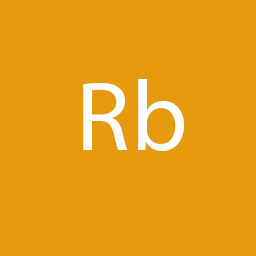
<style>
.page{position:relative;width:256px;height:256px;background:#e49a0c}
.page>*{position:absolute;margin:0}
.t1{font:100px "MyriadPro-Regular";color:#ffffff}
</style>
<div class="page">
<p class="t1" style="left:83px;top:79px;width:101px;height:72px">Rb</p>
</div>
